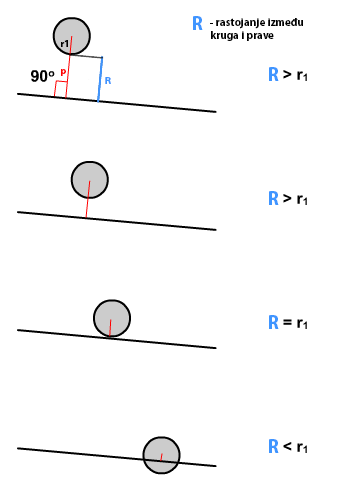
<style>
.page{position:relative;width:350px;height:500px;background:#ffffff}
.page>*{position:absolute;margin:0}
.t1{font:20px "MyriadPro-Bold";color:#3f95ff}
.t2{font:11px "MyriadPro-Bold";color:#000000}
.t3{font:10px "MyriadPro-Bold";color:#000000}
.t4{font:10px "MyriadPro-Bold";color:#ff0000}
.t5{font:10px "MyriadPro-Bold";color:#3f95ff}
</style>
<div class="page">
<p class="t1" style="left:193px;top:16px;width:10px;height:14px">R</p>
<p class="t2" style="left:210px;top:18px;width:93px;height:23px">- rastojanje između<br>kruga i prave</p>
<p class="t3" style="left:61px;top:40px;width:7px;height:7px">r1</p>
<p class="t4" style="left:61px;top:69px;width:5px;height:7px">p</p>
<p class="t5" style="left:105px;top:77px;width:6px;height:7px">R</p>
<p class="t1" style="left:269px;top:67px;width:10px;height:14px">R</p>
<p class="t1" style="left:269px;top:191px;width:10px;height:14px">R</p>
<p class="t1" style="left:269px;top:315px;width:10px;height:14px">R</p>
<p class="t1" style="left:269px;top:439px;width:10px;height:14px">R</p>
</div>
